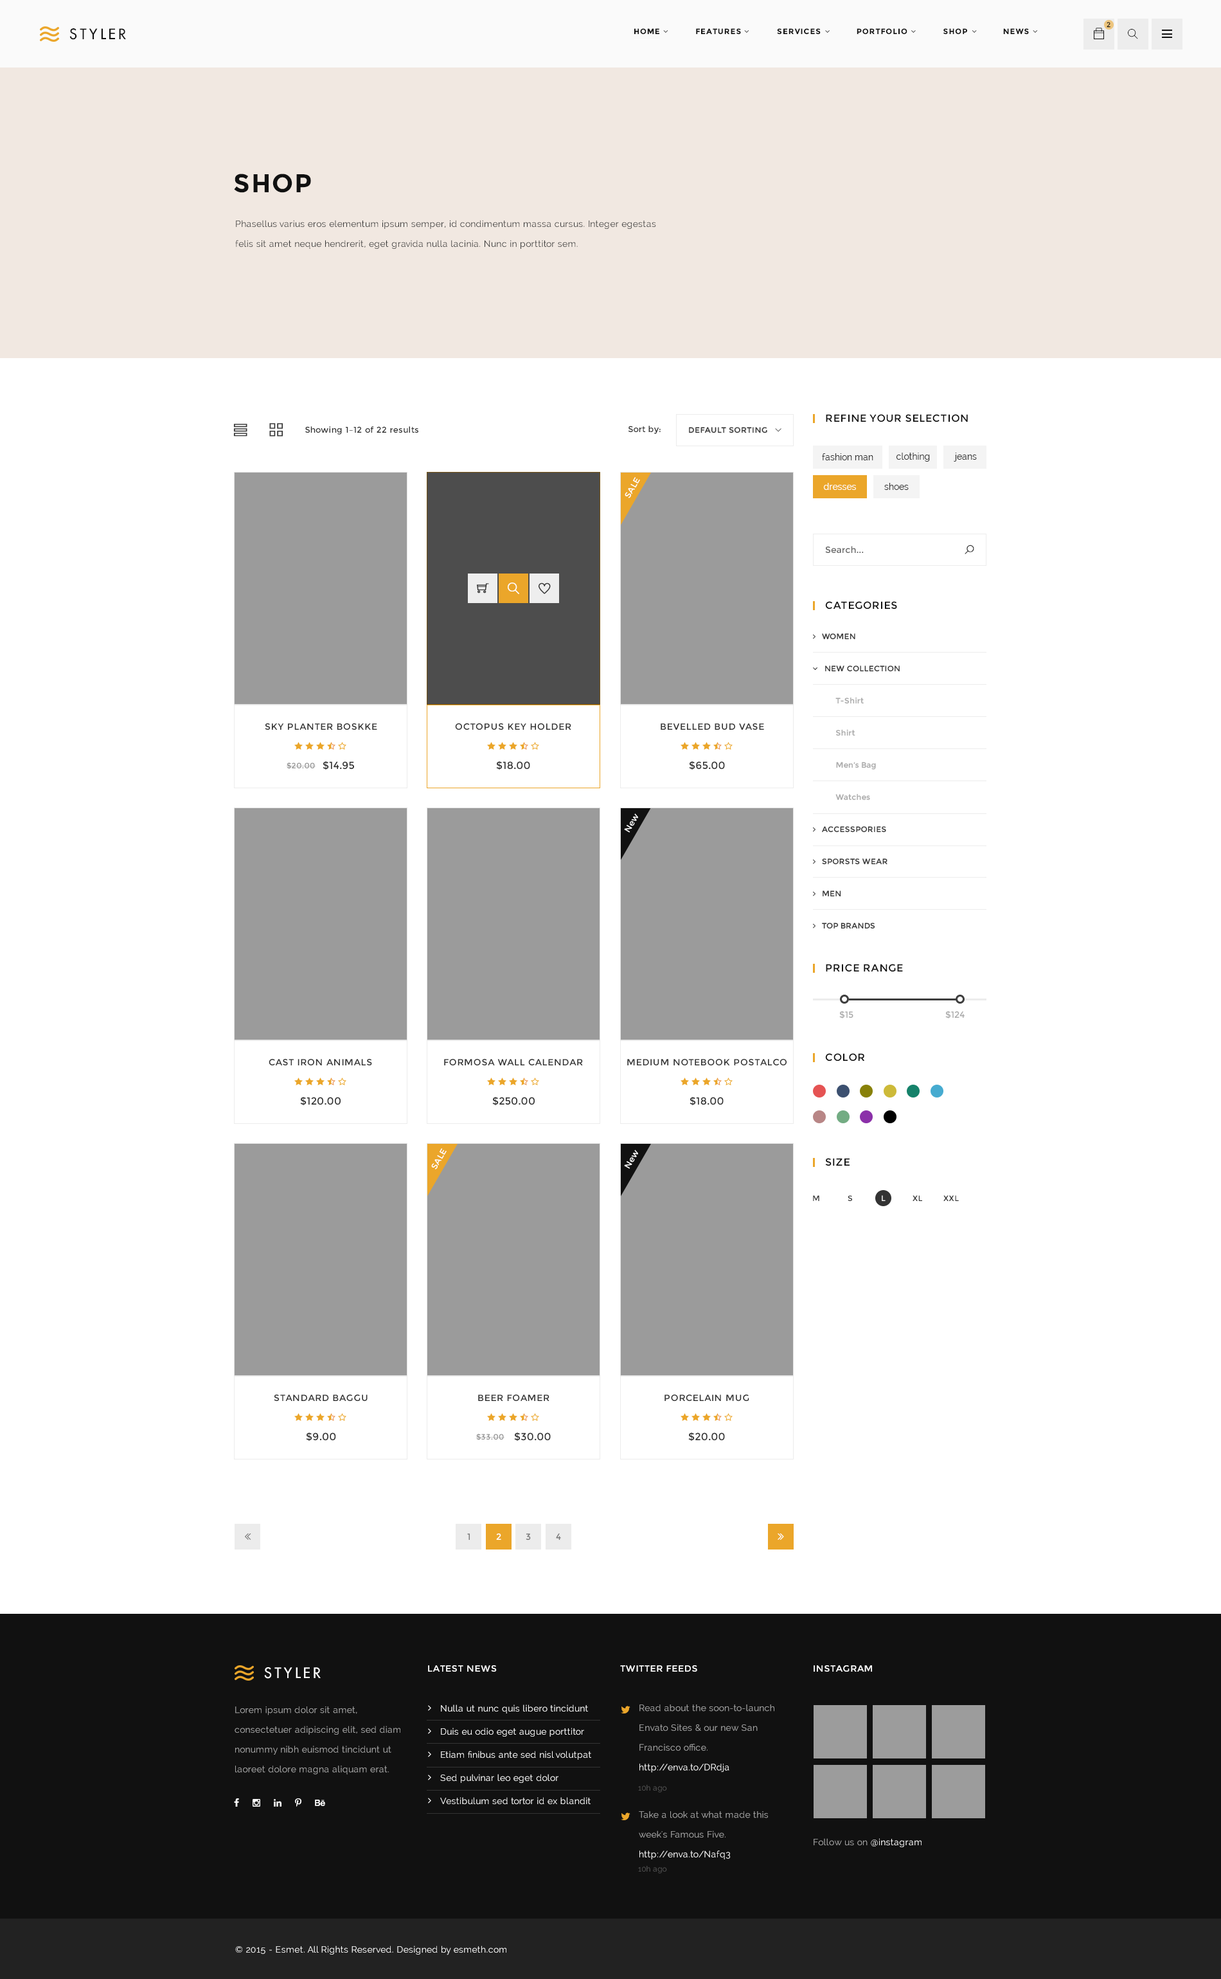
<style>
.page{position:relative;width:1221px;height:1979px;background:#ffffff}
.page>*{position:absolute;margin:0}
.t1{font:14.1px "FuturaLT";letter-spacing:0.2em;color:#111111;text-transform:uppercase}
.t2{font:7.7px "Montserrat-Bold";letter-spacing:0.075em;color:#111111;text-transform:uppercase}
.t3{font:7.1px "Montserrat-Regular";letter-spacing:0.075em;color:#111111;text-transform:uppercase}
.t4{font:25.7px "Montserrat-Bold";letter-spacing:0.05em;color:#111111;text-transform:uppercase}
.t5{font:9px/19.8px "Raleway";letter-spacing:0.02em;color:#333333}
.t6{font:8.4px "Montserrat-Regular";letter-spacing:0.02em;color:#333333}
.t7{font:10.3px "Montserrat-Regular";letter-spacing:0.05em;color:#111111;text-transform:uppercase}
.t8{font:7.7px "Montserrat-Regular";letter-spacing:0.05em;color:#333333;text-transform:uppercase}
.t9{font:9px "Raleway";color:#333333}
.t10{font:8.4px "Montserrat-Regular";letter-spacing:0.02em;color:#ffffff}
.t11{font:9px "Raleway";color:#ffffff}
.t12{font:9px "Montserrat-Regular";color:#666666}
.t13{font:9px "Montserrat-Regular";letter-spacing:0.05em;color:#333333;text-transform:uppercase}
.t14{font:10.3px "Montserrat-Regular";letter-spacing:0.02em;color:#333333;text-transform:uppercase}
.t15{font:7.7px "Montserrat-Regular";letter-spacing:0.05em;color:#929292;text-transform:uppercase}
.t16{font:9px "Montserrat-Regular";color:#a9a9a9}
.t17{font:7.7px "Montserrat-Regular";letter-spacing:0.05em;color:#ffffff;text-transform:uppercase}
.t18{font:9px "Montserrat-Regular";letter-spacing:0.05em;color:#777777;text-transform:uppercase}
.t19{font:9px "Montserrat-Regular";letter-spacing:0.05em;color:#ffffff;text-transform:uppercase}
.t20{font:14.1px "FuturaLT";letter-spacing:0.2em;color:#ffffff;text-transform:uppercase}
.t21{font:9px/19.8px "Raleway";letter-spacing:0.02em;color:#a9a9a9}
.t22{font:9px/23.1px "Raleway";letter-spacing:0.02em;color:#ffffff}
.t23{font:9px/19.8px "Raleway";letter-spacing:0.02em;color:#ffffff}
.t24{font:7.7px "Raleway";letter-spacing:0.02em;color:#545454}
.t25{font:9px "Raleway";letter-spacing:0.02em;color:#a9a9a9}
.t26{font:9px "Raleway";letter-spacing:0.02em;color:#ffffff}
</style>
<div class="page">
<p class="t1" style="left:69px;top:28px;width:57px;height:12px">styler</p>
<p class="t2" style="left:634px;top:28px;width:395px;height:6px">HOME              FEATURES              SERVICES              portfolio              SHOP              NEWS</p>
<p class="t3" style="left:1107px;top:22px;width:4px;height:6px">2</p>
<p class="t4" style="left:234px;top:174px;width:77px;height:19px">Shop</p>
<p class="t5" style="left:235px;top:220px;width:421px;height:29px">Phasellus varius eros elementum ipsum semper, id condimentum massa cursus. Integer egestas felis sit amet neque hendrerit, eget gravida nulla lacinia. Nunc in porttitor sem.</p>
<p class="t6" style="left:628px;top:426px;width:33px;height:8px">Sort by:</p>
<p class="t7" style="left:826px;top:414px;width:142px;height:8px">refine your selection</p>
<p class="t6" style="left:305px;top:426px;width:114px;height:9px">Showing 1–12 of 22 results</p>
<p class="t8" style="left:689px;top:427px;width:79px;height:6px">Default sorting</p>
<p class="t9" style="left:822px;top:453px;width:52px;height:7px">fashion man</p>
<p class="t9" style="left:896px;top:453px;width:34px;height:9px">clothing</p>
<p class="t9" style="left:954px;top:453px;width:23px;height:9px">jeans</p>
<p class="t10" style="left:625px;top:477px;width:15px;height:21px;rotate:-60deg">SALE</p>
<p class="t11" style="left:824px;top:483px;width:32px;height:7px">dresses</p>
<p class="t9" style="left:885px;top:483px;width:24px;height:7px">shoes</p>
<p class="t12" style="left:825px;top:546px;width:39px;height:7px">Search...</p>
<p class="t7" style="left:825px;top:601px;width:72px;height:8px">categories</p>
<p class="t13" style="left:265px;top:723px;width:112px;height:7px">Sky Planter Boskke</p>
<p class="t13" style="left:455px;top:723px;width:117px;height:7px">Octopus Key Holder</p>
<p class="t13" style="left:661px;top:723px;width:103px;height:7px">Bevelled Bud Vase</p>
<p class="t14" style="left:323px;top:761px;width:31px;height:9px">$14.95</p>
<p class="t14" style="left:496px;top:761px;width:34px;height:9px">$18.00</p>
<p class="t14" style="left:689px;top:761px;width:36px;height:9px">$65.00</p>
<p class="t15" style="left:287px;top:762px;width:29px;height:7px">$20.00</p>
<p class="t10" style="left:624px;top:813px;width:14px;height:20px;rotate:-60deg">New</p>
<p class="t7" style="left:826px;top:964px;width:77px;height:8px">price range</p>
<p class="t16" style="left:840px;top:1011px;width:14px;height:7px">$15</p>
<p class="t16" style="left:946px;top:1011px;width:19px;height:7px">$124</p>
<p class="t13" style="left:269px;top:1059px;width:103px;height:6px">Cast Iron Animals</p>
<p class="t13" style="left:444px;top:1059px;width:139px;height:6px">Formosa Wall Calendar</p>
<p class="t13" style="left:627px;top:1059px;width:160px;height:6px">Medium Notebook Postalco</p>
<p class="t7" style="left:825px;top:1053px;width:40px;height:8px">color</p>
<p class="t14" style="left:300px;top:1097px;width:41px;height:9px">$120.00</p>
<p class="t14" style="left:492px;top:1097px;width:43px;height:9px">$250.00</p>
<p class="t14" style="left:690px;top:1097px;width:34px;height:9px">$18.00</p>
<p class="t10" style="left:431px;top:1148px;width:16px;height:21px;rotate:-60deg">SALE</p>
<p class="t10" style="left:624px;top:1149px;width:14px;height:20px;rotate:-60deg">New</p>
<p class="t7" style="left:825px;top:1158px;width:25px;height:8px">size</p>
<p class="t8" style="left:813px;top:1195px;width:7px;height:6px">M</p>
<p class="t8" style="left:848px;top:1195px;width:4px;height:6px">S</p>
<p class="t17" style="left:882px;top:1195px;width:4px;height:6px">L</p>
<p class="t8" style="left:913px;top:1195px;width:10px;height:6px">Xl</p>
<p class="t8" style="left:944px;top:1195px;width:15px;height:6px">xxl</p>
<p class="t13" style="left:274px;top:1394px;width:94px;height:7px">Standard Baggu</p>
<p class="t13" style="left:478px;top:1394px;width:72px;height:7px">Beer Foamer</p>
<p class="t13" style="left:665px;top:1394px;width:85px;height:7px">Porcelain Mug</p>
<p class="t14" style="left:306px;top:1432px;width:30px;height:9px">$9.00</p>
<p class="t15" style="left:476px;top:1434px;width:29px;height:6px">$33.00</p>
<p class="t14" style="left:514px;top:1432px;width:37px;height:9px">$30.00</p>
<p class="t14" style="left:688px;top:1432px;width:37px;height:9px">$20.00</p>
<p class="t18" style="left:467px;top:1533px;width:3px;height:7px">1</p>
<p class="t19" style="left:496px;top:1533px;width:5px;height:7px">2</p>
<p class="t18" style="left:526px;top:1533px;width:5px;height:7px">3</p>
<p class="t18" style="left:556px;top:1533px;width:5px;height:7px">4</p>
<p class="t20" style="left:264px;top:1667px;width:57px;height:12px">styler</p>
<p class="t19" style="left:428px;top:1665px;width:69px;height:6px">latest news</p>
<p class="t19" style="left:620px;top:1665px;width:78px;height:6px">twitter feeds</p>
<p class="t19" style="left:814px;top:1665px;width:58px;height:6px">instagram</p>
<p class="t21" style="left:235px;top:1706px;width:166px;height:68px">Lorem ipsum dolor sit amet, consectetuer adipiscing elit, sed diam nonummy nibh euismod tincidunt ut laoreet dolore magna aliquam erat.</p>
<p class="t22" style="left:440px;top:1704px;width:151px;height:101px">Nulla ut nunc quis libero tincidunt<br>Duis eu odio eget augue porttitor<br>Etiam finibus ante sed nisl volutpat<br>Sed pulvinar leo eget dolor<br>Vestibulum sed tortor id ex blandit</p>
<p class="t21" style="left:640px;top:1704px;width:135px;height:68px">Read about the soon-to-launch Envato Sites &amp; our new San Francisco office. <span class="t23">http://enva.to/DRdja</span></p>
<p class="t24" style="left:638px;top:1785px;width:29px;height:7px">10h ago</p>
<p class="t21" style="left:639px;top:1811px;width:129px;height:48px">Take a look at what made this week's Famous Five. <span class="t23">http://enva.to/Nafq3</span></p>
<p class="t25" style="left:814px;top:1838px;width:108px;height:9px">Follow us on <span class="t26">@instagram</span></p>
<p class="t24" style="left:638px;top:1866px;width:29px;height:7px">10h ago</p>
<p class="t26" style="left:235px;top:1945px;width:272px;height:10px">© 2015 - Esmet. All Rights Reserved. Designed by esmeth.com</p>
</div>
